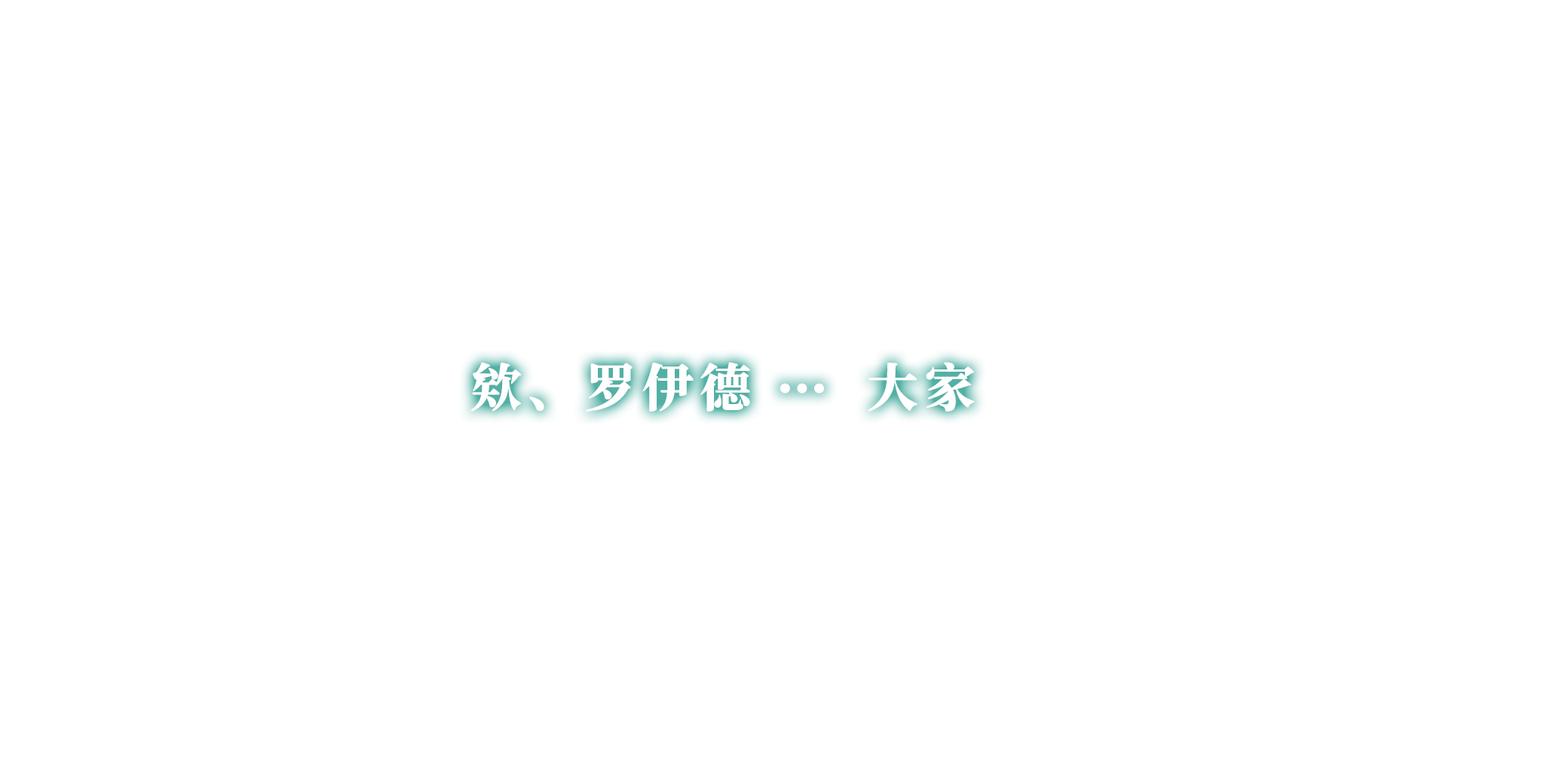
<style>
.page{position:relative;width:1544px;height:772px;background:#ffffff}
.page>*{position:absolute;margin:0}
.t1{font:51.3px "ChillJinshuSongHeavy";letter-spacing:0.12em;color:#ffffff}
.t2{font:51.3px "FZTYSK--GBK1-0";letter-spacing:0.12em;color:#ffffff}
</style>
<div class="page">
<p class="t1" style="left:471px;top:362px;width:503px;height:50px">欸、罗伊德 <span class="t2">… </span>大家</p>
</div>
